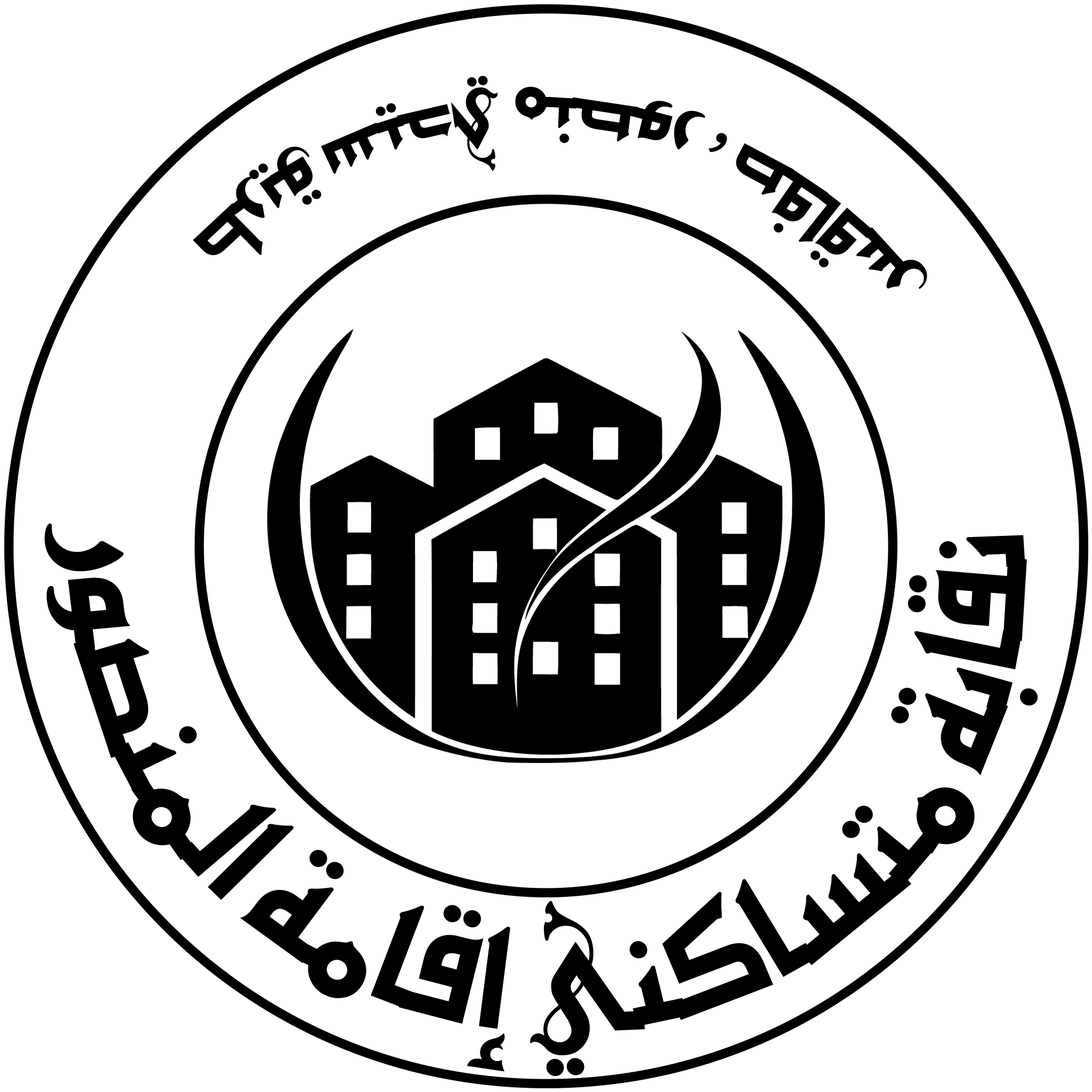
<style>
.page{position:relative;width:1092px;height:1092px;background:#ffffff}
.page>*{position:absolute;margin:0}
.t1{font:166.1px "Elgharib-AlwiSahafa";letter-spacing:-0.02em;color:#000000;text-transform:uppercase}
.t2{font:90.3px "Elgharib-AlwiSahafa";letter-spacing:-0.02em;color:#000000;text-transform:uppercase}
.t3{font:90.3px "MyriadArabic-Regular";letter-spacing:-0.02em;color:#000000;text-transform:uppercase}
</style>
<div class="page">
<p class="t1" style="left:44px;top:76px;width:994px;height:1001px;rotate:56deg">نقابة متساكني إقامة المنصور                                   <span class="t2">طريق سيدي منصور </span><span class="t3">،</span><span class="t2"> صفاقس</span></p>
</div>
